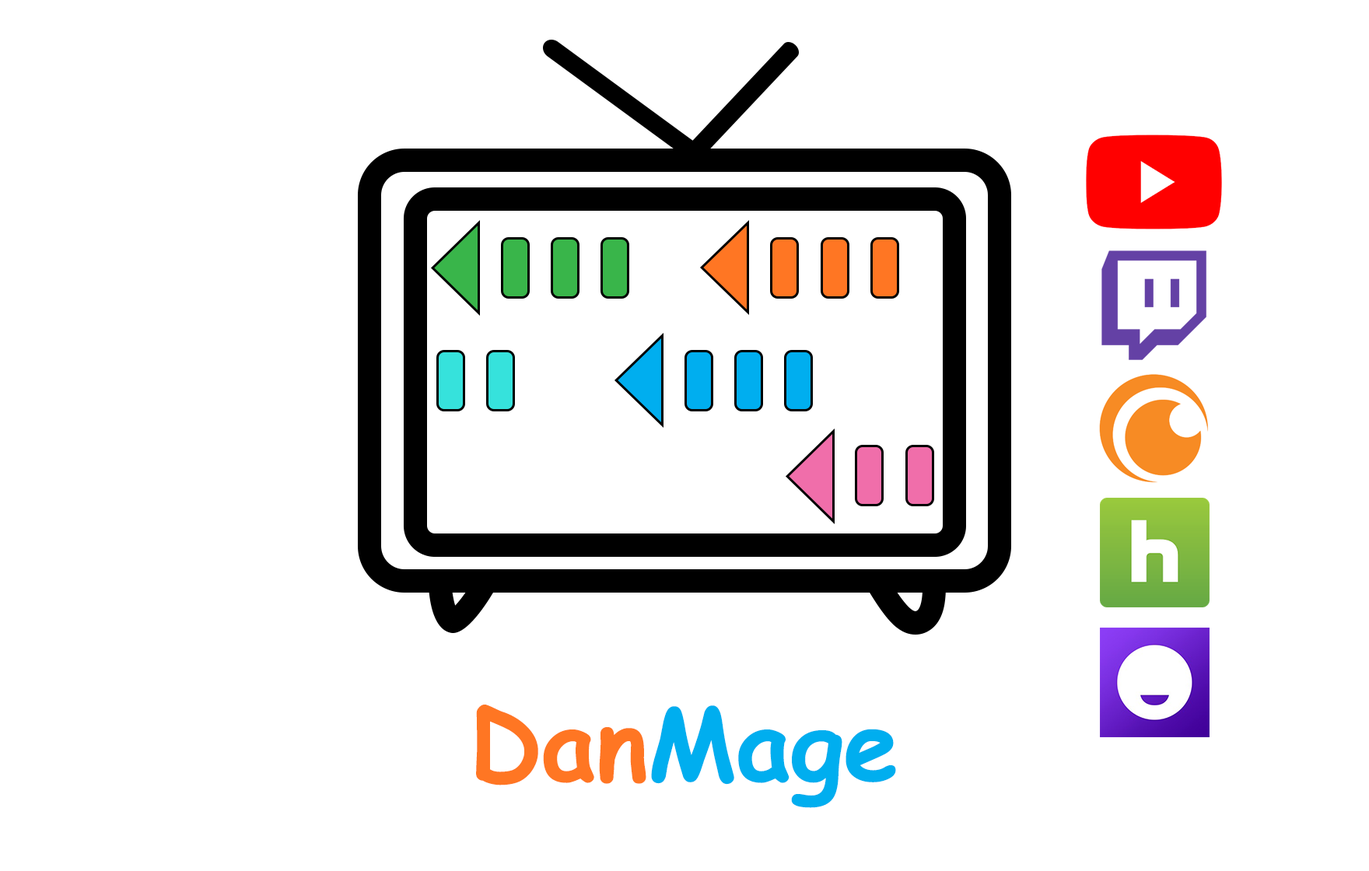
<style>
.page{position:relative;width:1369px;height:871px;background:#ffffff}
.page>*{position:absolute;margin:0}
.t1{font:99.3px "ComicSansMS-Bold";color:#00aeef}
.t2{font:99.3px "ComicSansMS-Bold";color:#ff7623}
</style>
<div class="page">
<p class="t1" style="left:476px;top:705px;width:420px;height:103px"><span class="t2">Dan</span>Mage</p>
</div>
